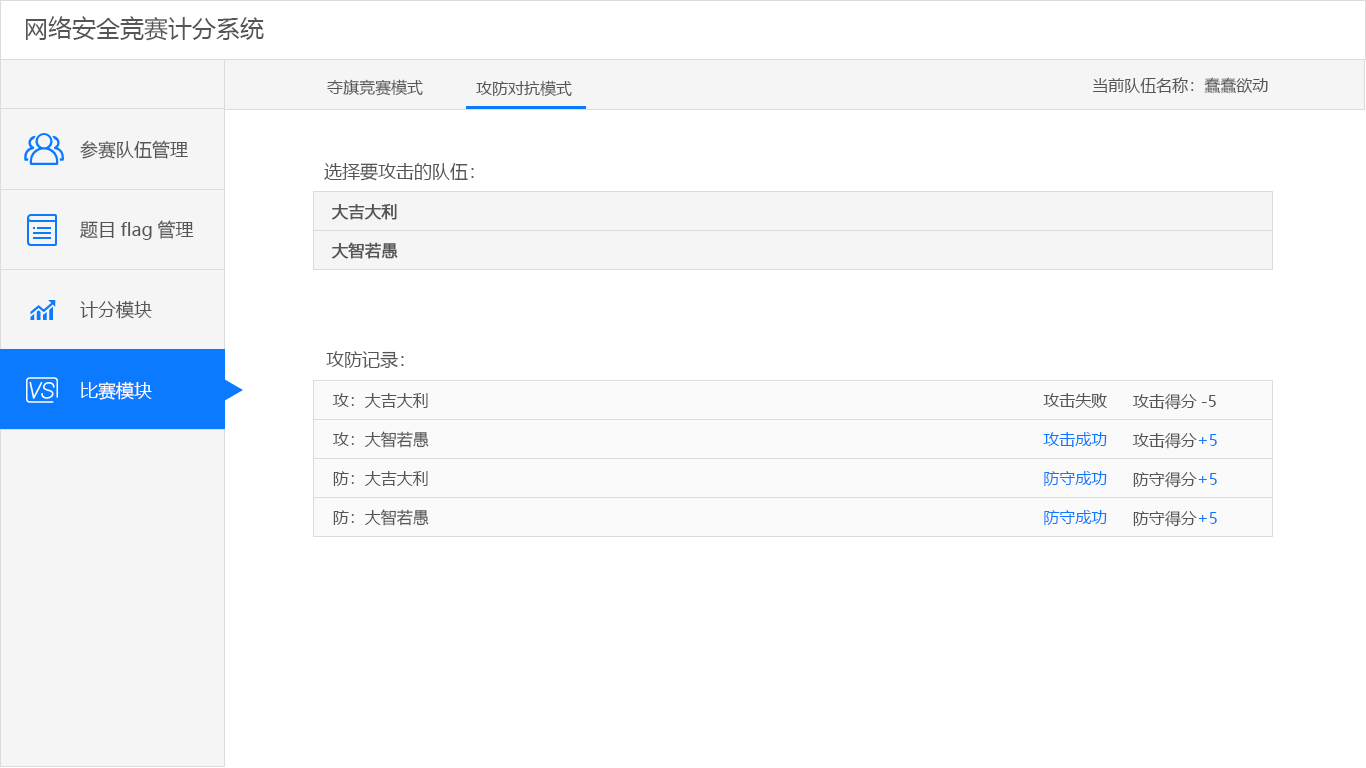
<style>
.page{position:relative;width:1366px;height:768px;background:#ffffff}
.page>*{position:absolute;margin:0}
.t1{font:24px "MicrosoftYaHei";color:#555555}
.t2{font:16px "MicrosoftYaHei";color:#555555}
.t3{font:18px "MicrosoftYaHei";color:#555555}
.t4{font:16px "MicrosoftYaHei";color:#555555;font-weight:bold}
.t5{font:18px "MicrosoftYaHei";color:#ffffff}
.t6{font:16px "MicrosoftYaHei";color:#0c7afe}
</style>
<div class="page">
<p class="t1" style="left:26px;top:16px;width:238px;height:25px">网络安全竞赛计分系统</p>
<p class="t2" style="left:1093px;top:77px;width:175px;height:16px">当前队伍名称：蠢蠢欲动</p>
<p class="t2" style="left:327px;top:79px;width:96px;height:17px">夺旗竞赛模式</p>
<p class="t2" style="left:476px;top:80px;width:96px;height:16px">攻防对抗模式</p>
<p class="t3" style="left:80px;top:140px;width:108px;height:19px">参赛队伍管理</p>
<p class="t3" style="left:324px;top:163px;width:150px;height:18px">选择要攻击的队伍：</p>
<p class="t4" style="left:331px;top:204px;width:66px;height:16px">大吉大利</p>
<p class="t3" style="left:80px;top:220px;width:114px;height:20px">题目flag管理</p>
<p class="t4" style="left:331px;top:242px;width:67px;height:17px">大智若愚</p>
<p class="t3" style="left:80px;top:300px;width:72px;height:19px">计分模块</p>
<p class="t3" style="left:326px;top:351px;width:78px;height:18px">攻防记录：</p>
<p class="t5" style="left:81px;top:381px;width:71px;height:19px">比赛模块</p>
<p class="t5" style="left:81px;top:381px;width:71px;height:19px">比赛模块</p>
<p class="t2" style="left:333px;top:393px;width:95px;height:15px">攻：大吉大利</p>
<p class="t2" style="left:1043px;top:393px;width:64px;height:15px">攻击失败</p>
<p class="t2" style="left:1133px;top:393px;width:83px;height:17px">攻击得分-5</p>
<p class="t2" style="left:333px;top:431px;width:96px;height:17px">攻：大智若愚</p>
<p class="t6" style="left:1043px;top:432px;width:64px;height:15px">攻击成功</p>
<p class="t2" style="left:1133px;top:432px;width:64px;height:17px">攻击得分</p>
<p class="t6" style="left:1198px;top:434px;width:19px;height:12px">+5</p>
<p class="t2" style="left:333px;top:471px;width:95px;height:15px">防：大吉大利</p>
<p class="t6" style="left:1044px;top:471px;width:63px;height:15px">防守成功</p>
<p class="t2" style="left:1133px;top:471px;width:64px;height:17px">防守得分</p>
<p class="t6" style="left:1198px;top:473px;width:19px;height:12px">+5</p>
<p class="t2" style="left:333px;top:509px;width:96px;height:17px">防：大智若愚</p>
<p class="t6" style="left:1044px;top:510px;width:63px;height:15px">防守成功</p>
<p class="t2" style="left:1133px;top:510px;width:64px;height:17px">防守得分</p>
<p class="t6" style="left:1198px;top:512px;width:19px;height:12px">+5</p>
</div>
